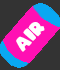
<style>
.page{position:relative;width:60px;height:70px;background:#333333}
.page>*{position:absolute;margin:0}
.t1{font:18px "ARCO-Typography-Regular";color:#ffffff}
</style>
<div class="page">
<p class="t1" style="left:16px;top:22px;width:29px;height:30px;rotate:-45deg">AIR</p>
</div>
